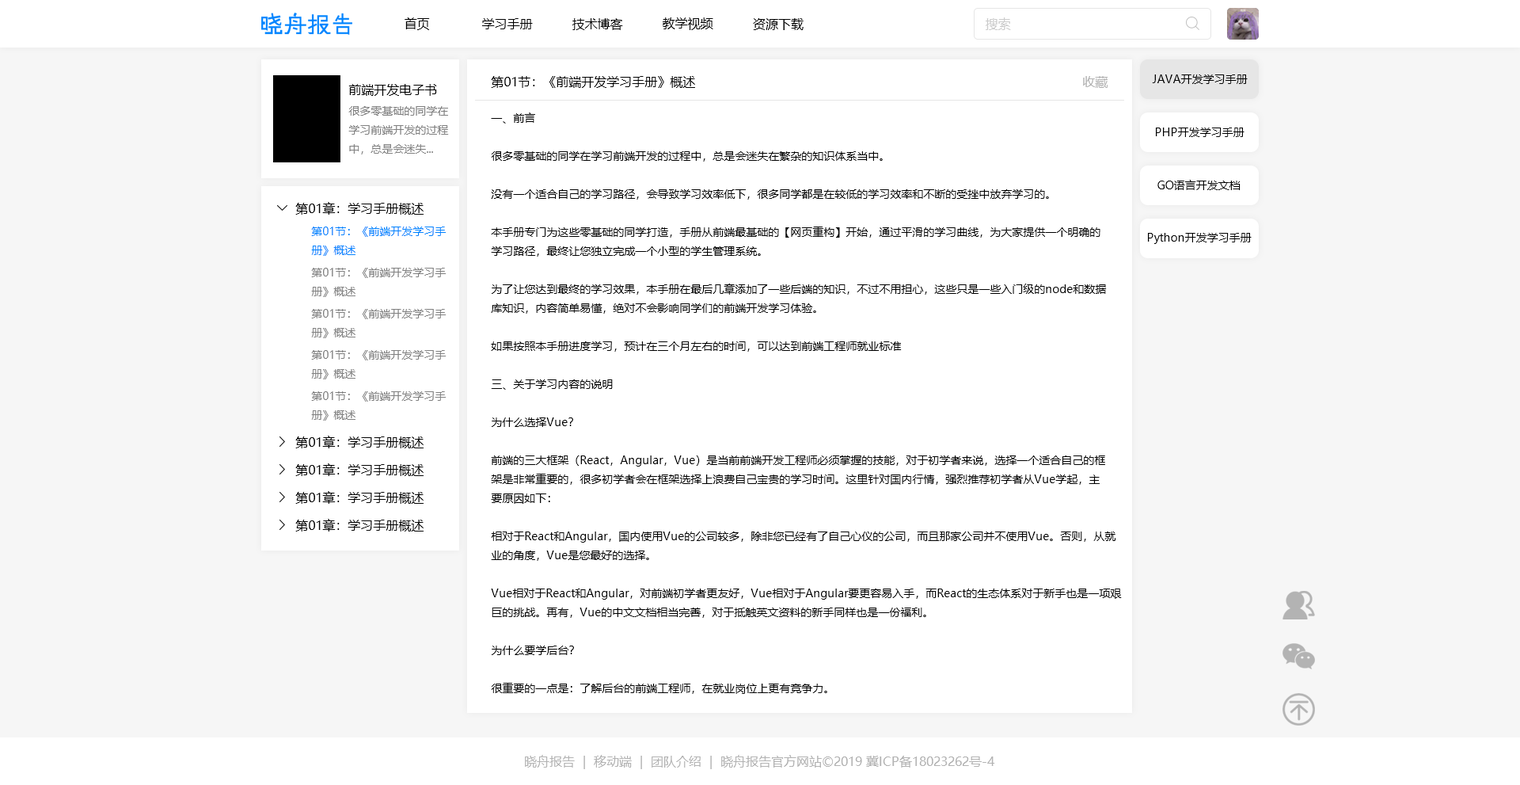
<style>
.page{position:relative;width:1520px;height:785px;background:#ffffff}
.page>*{position:absolute;margin:0}
.t1{font:12.7px "MicrosoftYaHei";color:#000000}
.t2{font:12.7px "MicrosoftYaHei";color:#cccccc}
.t3{font:12.7px "MicrosoftYaHei";color:#b3b3b3}
.t4{font:11.1px "MicrosoftYaHei";color:#000000}
.t5{font:11.1px/19px "MicrosoftYaHei";color:#808080}
.t6{font:11.1px/19px "MicrosoftYaHei";color:#000000}
.t7{font:11.1px/19px "MicrosoftYaHei";color:#0084ff}
</style>
<div class="page">
<p class="t1" style="left:405px;top:17px;width:25px;height:13px">首页</p>
<p class="t1" style="left:663px;top:17px;width:50px;height:13px">教学视频</p>
<p class="t2" style="left:986px;top:17px;width:25px;height:13px">搜索</p>
<p class="t1" style="left:482px;top:18px;width:51px;height:11px">学习手册</p>
<p class="t1" style="left:572px;top:18px;width:51px;height:12px">技术博客</p>
<p class="t1" style="left:753px;top:18px;width:51px;height:12px">资源下载</p>
<p class="t1" style="left:491px;top:76px;width:204px;height:12px">第01节：《前端开发学习手册》概述</p>
<p class="t3" style="left:1083px;top:76px;width:25px;height:12px">收藏</p>
<p class="t4" style="left:1152px;top:74px;width:96px;height:10px">JAVA开发学习手册</p>
<p class="t1" style="left:348px;top:84px;width:89px;height:12px">前端开发电子书</p>
<p class="t5" style="left:348px;top:106px;width:101px;height:48px">很多零基础的同学在<br>学习前端开发的过程<br>中，总是会迷失...</p>
<p class="t6" style="left:491px;top:112px;width:631px;height:581px">一、前言<br><br>很多零基础的同学在学习前端开发的过程中，总是会迷失在繁杂的知识体系当中。<br><br>没有一个适合自己的学习路径，会导致学习效率低下，很多同学都是在较低的学习效率和不断的受挫中放弃学习的。<br><br>本手册专门为这些零基础的同学打造，手册从前端最基础的【网页重构】开始，通过平滑的学习曲线，为大家提供一个明确的<br>学习路径，最终让您独立完成一个小型的学生管理系统。<br><br>为了让您达到最终的学习效果，本手册在最后几章添加了一些后端的知识，不过不用担心，这些只是一些入门级的node和数据<br>库知识，内容简单易懂，绝对不会影响同学们的前端开发学习体验。<br><br>如果按照本手册进度学习，预计在三个月左右的时间，可以达到前端工程师就业标准<br><br>三、关于学习内容的说明<br><br>为什么选择Vue？<br><br>前端的三大框架（React，Angular，Vue）是当前前端开发工程师必须掌握的技能，对于初学者来说，选择一个适合自己的框<br>架是非常重要的，很多初学者会在框架选择上浪费自己宝贵的学习时间。这里针对国内行情，强烈推荐初学者从Vue学起，主<br>要原因如下：<br><br>相对于React和Angular，国内使用Vue的公司较多，除非您已经有了自己心仪的公司，而且那家公司并不使用Vue。否则，从就<br>业的角度，Vue是您最好的选择。<br><br>Vue相对于React和Angular，对前端初学者更友好，Vue相对于Angular要更容易入手，而React的生态体系对于新手也是一项艰<br>巨的挑战。再有，Vue的中文文档相当完善，对于抵触英文资料的新手同样也是一份福利。<br><br>为什么要学后台？<br><br>很重要的一点是：了解后台的前端工程师，在就业岗位上更有竞争力。</p>
<p class="t4" style="left:1156px;top:127px;width:88px;height:10px">PHP开发学习手册</p>
<p class="t4" style="left:1157px;top:180px;width:84px;height:10px">GO语言开发文档</p>
<p class="t1" style="left:295px;top:202px;width:129px;height:13px">第01章：学习手册概述</p>
<p class="t7" style="left:311px;top:226px;width:135px;height:30px">第01节：《前端开发学习手<br>册》概述</p>
<p class="t4" style="left:1148px;top:233px;width:104px;height:11px">Python开发学习手册</p>
<p class="t5" style="left:311px;top:268px;width:135px;height:29px">第01节：《前端开发学习手<br>册》概述</p>
<p class="t5" style="left:311px;top:309px;width:135px;height:29px">第01节：《前端开发学习手<br>册》概述</p>
<p class="t5" style="left:311px;top:350px;width:135px;height:29px">第01节：《前端开发学习手<br>册》概述</p>
<p class="t5" style="left:311px;top:391px;width:135px;height:29px">第01节：《前端开发学习手<br>册》概述</p>
<p class="t1" style="left:295px;top:435px;width:129px;height:13px">第01章：学习手册概述</p>
<p class="t1" style="left:295px;top:463px;width:129px;height:13px">第01章：学习手册概述</p>
<p class="t1" style="left:295px;top:491px;width:129px;height:12px">第01章：学习手册概述</p>
<p class="t1" style="left:295px;top:519px;width:129px;height:12px">第01章：学习手册概述</p>
<p class="t3" style="left:525px;top:754px;width:470px;height:15px">晓舟报告  |  移动端  |  团队介绍  |  晓舟报告官方网站©2019 冀ICP备18023262号-4</p>
</div>
